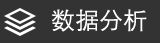
<style>
.page{position:relative;width:160px;height:43px;background:#333333}
.page>*{position:absolute;margin:0}
.t1{font:24px "STHeitiSC-Light";color:#ffffff}
</style>
<div class="page">
<p class="t1" style="left:52px;top:9px;width:95px;height:23px">数据分析</p>
</div>
